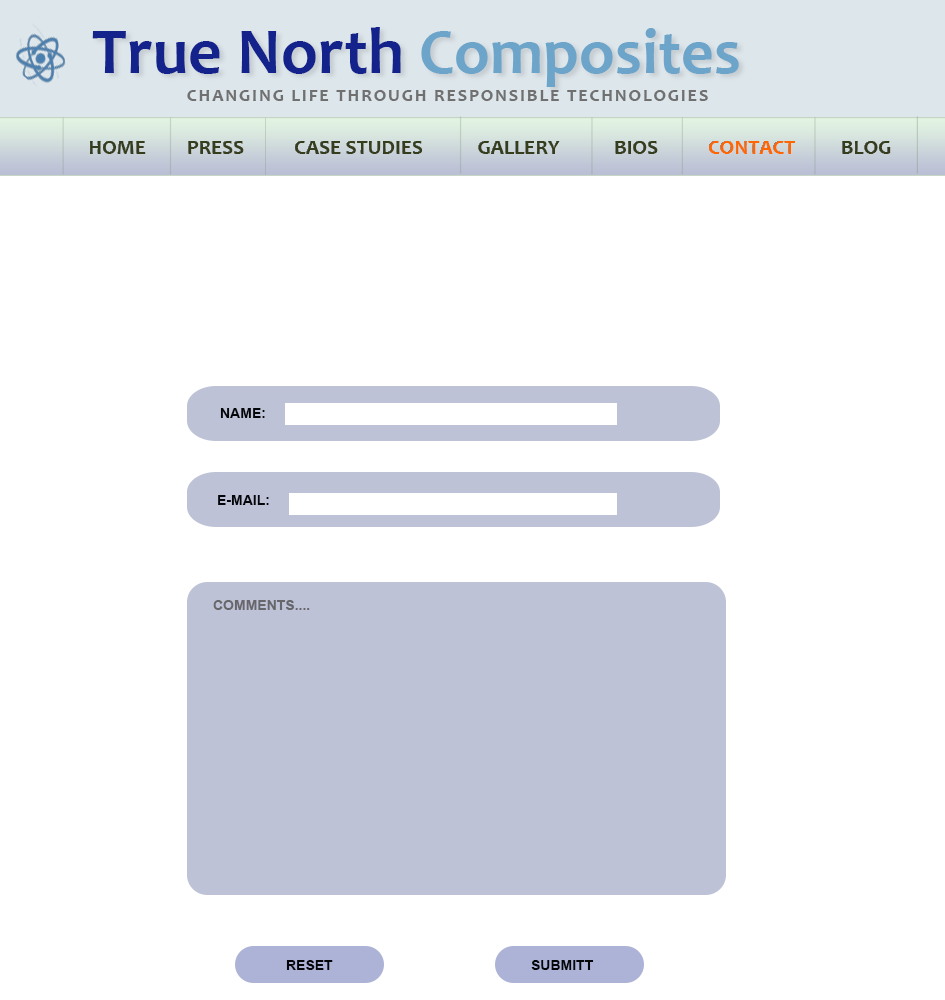
<style>
.page{position:relative;width:945px;height:1000px;background:#ffffff}
.page>*{position:absolute;margin:0}
.t1{font:66.4px "Candara-Bold";color:#14228b}
.t2{font:64.2px "Candara-Bold";color:#6da4c9}
.t3{font:18px "Candara-Bold";letter-spacing:0.1em;color:#707070;text-transform:uppercase}
.t4{font:21px "Candara-Bold";color:#353d1d;text-transform:uppercase}
.t5{font:21px "Candara-Bold";color:#ff6600;text-transform:uppercase}
.t6{font:14px "Arial-BoldMT";color:#050609;text-transform:uppercase}
.t7{font:14px "Arial-BoldMT";color:#66666b;text-transform:uppercase}
</style>
<div class="page">
<p class="t1" style="left:92px;top:27px;width:647px;height:60px">True North <span class="t2">Composites</span></p>
<p class="t3" style="left:187px;top:90px;width:521px;height:11px">Changing life through responsible technologies</p>
<p class="t4" style="left:90px;top:141px;width:801px;height:13px">Home         Press           Case Studies            Gallery            Bios           <span class="t5">Contact</span>          Blog</p>
<p class="t6" style="left:220px;top:408px;width:45px;height:10px">name:</p>
<p class="t6" style="left:218px;top:495px;width:51px;height:10px">e-mail:</p>
<p class="t7" style="left:213px;top:600px;width:97px;height:10px">comments....</p>
<p class="t6" style="left:286px;top:960px;width:47px;height:10px">Reset</p>
<p class="t6" style="left:531px;top:960px;width:63px;height:10px">Submitt</p>
</div>
